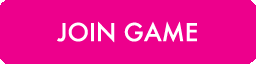
<style>
.page{position:relative;width:256px;height:64px;background:#ed008c}
.page>*{position:absolute;margin:0}
.t1{font:24px "Futura-Medium";color:#ffffff}
</style>
<div class="page">
<p class="t1" style="left:57px;top:21px;width:140px;height:22px">JOIN GAME</p>
</div>
